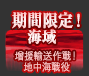
<style>
.page{position:relative;width:89px;height:76px;background:#333333}
.page>*{position:absolute;margin:0}
.t1{font:17px "RyuminPr6N-ExBold";color:#ffe4e4;font-weight:bold;scale:0.9 1}
.t2{font:16px "RyuminPr6N-ExBold";color:#ffebeb;font-weight:bold;scale:0.9 1}
.t3{font:10px/11px "GothicMB101Pr6N-Light";color:#ffcbcb;font-weight:bold;scale:0.9 1}
</style>
<div class="page">
<p class="t1" style="left:12px;top:12px;width:68px;height:17px">期間限定！</p>
<p class="t2" style="left:27px;top:29px;width:29px;height:15px">海域</p>
<p class="t3" style="left:15px;top:51px;width:60px;height:21px;text-align:center">增援輸送作戰！<br>地中海戰役</p>
</div>
